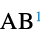
<style>
.page{position:relative;width:40px;height:40px;background:#ffffff}
.page>*{position:absolute;margin:0}
.t1{font:24px "Times-Roman";letter-spacing:0.04em;color:#000000;text-transform:uppercase}
.t2{font:24px "Times-Roman";letter-spacing:0.04em;color:#298cba;text-transform:uppercase}
</style>
<div class="page">
<p class="t1" style="left:0px;top:11px;width:41px;height:18px">AB<span class="t2">1</span></p>
</div>
